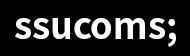
<style>
.page{position:relative;width:190px;height:56px;background:#000000}
.page>*{position:absolute;margin:0}
.t1{font:36px "SourceHanSansKR-Bold";color:#ffffff}
</style>
<div class="page">
<p class="t1" style="left:15px;top:18px;width:161px;height:29px">ssucoms;</p>
</div>
